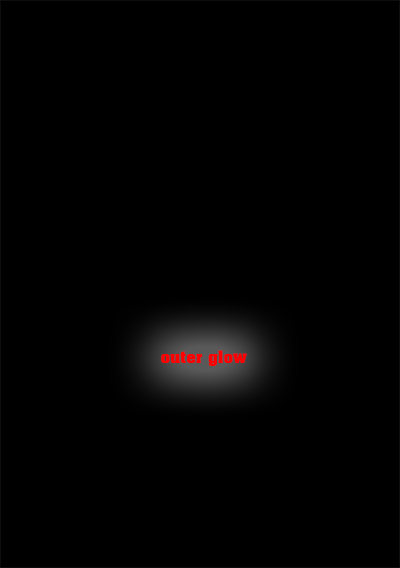
<style>
.page{position:relative;width:400px;height:568px;background:#000000}
.page>*{position:absolute;margin:0}
.t1{font:16.6px "AachenBTBold";color:#ff0000}
</style>
<div class="page">
<p class="t1" style="left:161px;top:350px;width:86px;height:16px">outer glow</p>
</div>
